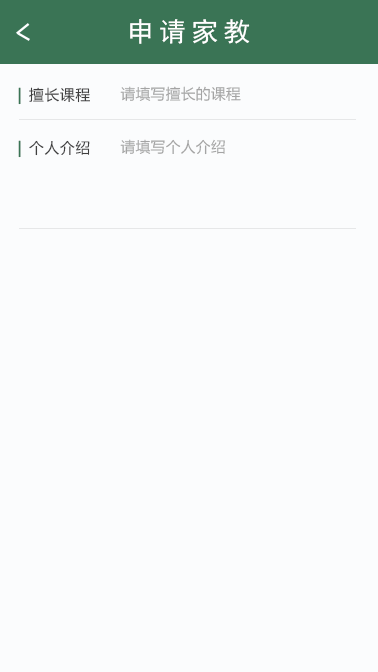
<style>
.page{position:relative;width:378px;height:672px;background:#fbfcfd}
.page>*{position:absolute;margin:0}
.t1{font:26.7px "SimHei";letter-spacing:0.2em;color:#ffffff}
.t2{font:14.7px "MicrosoftYaHei";letter-spacing:0.05em;color:#3f3f3f}
.t3{font:14.7px "MicrosoftYaHei";letter-spacing:0.1em;color:#3a7455;font-weight:bold}
.t4{font:14.7px "MicrosoftYaHei";letter-spacing:0.025em;color:#a4a4a4}
</style>
<div class="page">
<p class="t1" style="left:130px;top:18px;width:120px;height:26px">申请家教</p>
<p class="t2" style="left:18px;top:87px;width:72px;height:18px"><span class="t3">| </span>擅长课程</p>
<p class="t4" style="left:120px;top:86px;width:121px;height:15px">请填写擅长的课程</p>
<p class="t2" style="left:18px;top:140px;width:72px;height:18px"><span class="t3">| </span>个人介绍</p>
<p class="t4" style="left:120px;top:139px;width:105px;height:16px">请填写个人介绍</p>
</div>
